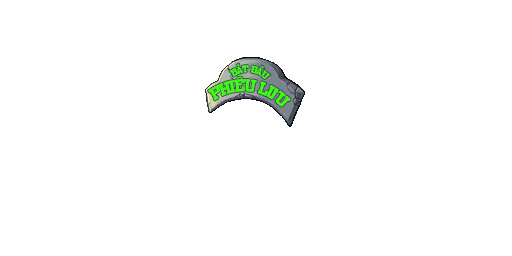
<style>
.page{position:relative;width:512px;height:256px;background:#ffffff}
.page>*{position:absolute;margin:0}
.t1{font:7.5px "SVN-Zero";color:#40f818}
.t2{font:13.1px "SVN-Zero";color:#40f818}
</style>
<div class="page">
<p class="t1" style="left:229px;top:63px;width:42px;height:16px;rotate:5deg">Bắt Đầu</p>
<p class="t2" style="left:207px;top:76px;width:84px;height:31px;rotate:6deg">Phiêu Lưu</p>
</div>
